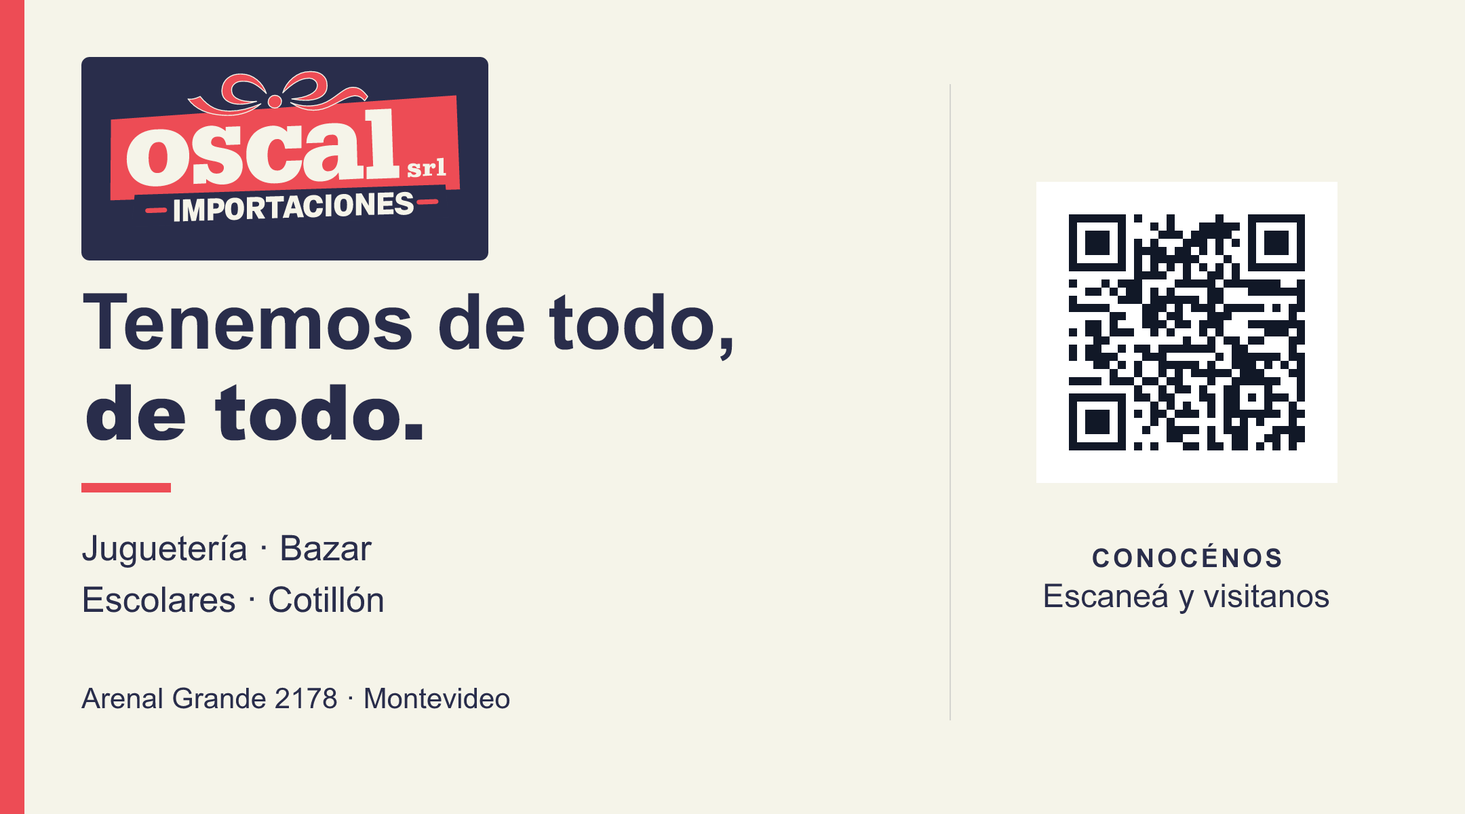
<style>
.page{position:relative;width:1465px;height:814px;background:#f5f4e9}
.page>*{position:absolute;margin:0}
.t1{font:77.3px "Arial-BoldMT";color:#292d4b}
.t2{font:77.3px "Arial-Black";color:#292d4b}
.t3{font:35.3px "ArialMT";color:#292d4b}
.t4{font:25.8px "Arial-BoldMT";letter-spacing:0.105em;color:#292d4b}
.t5{font:32.6px "ArialMT";color:#292d4b}
.t6{font:28.5px "ArialMT";color:#292d4b}
</style>
<div class="page">
<p class="t1" style="left:83px;top:293px;width:650px;height:69px">Tenemos de todo,</p>
<p class="t2" style="left:86px;top:384px;width:337px;height:57px">de todo.</p>
<p class="t3" style="left:82px;top:534px;width:290px;height:34px">Juguetería · Bazar</p>
<p class="t4" style="left:1093px;top:543px;width:188px;height:25px">CONOCÉNOS</p>
<p class="t3" style="left:84px;top:586px;width:299px;height:26px">Escolares · Cotillón</p>
<p class="t5" style="left:1045px;top:583px;width:284px;height:31px">Escaneá y visitanos</p>
<p class="t6" style="left:81px;top:687px;width:429px;height:22px">Arenal Grande 2178 · Montevideo</p>
</div>
